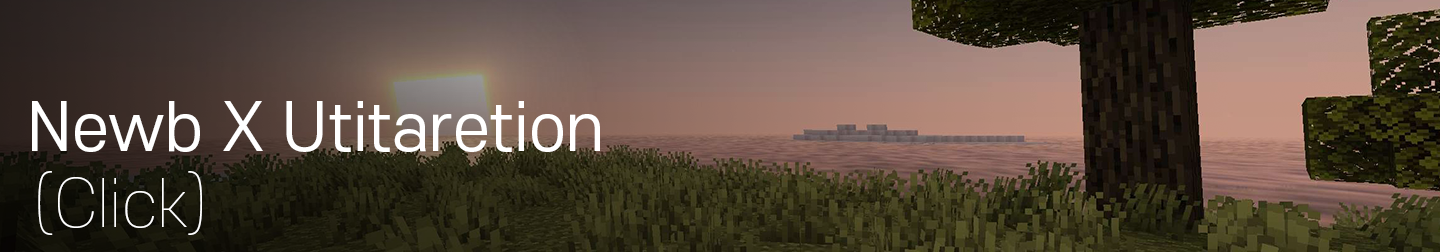
<style>
.page{position:relative;width:1440px;height:252px}
.page>*{position:absolute;margin:0}
.t1{font:64px "S-CoreDream-4Regular";color:#ffffff}
.t2{font:64px "S-CoreDream-1Thin";color:#ffffff}
</style>
<div class="page">
<p class="t1" style="left:32px;top:101px;width:568px;height:51px">Newb X Utitaretion</p>
<p class="t2" style="left:38px;top:171px;width:164px;height:64px">(Click)</p>
</div>
